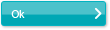
<style>
.page{position:relative;width:110px;height:30px;background:#4dc2cb}
.page>*{position:absolute;margin:0}
.t1{font:11px "MyriadPro-Regular";color:#ffffff}
</style>
<div class="page">
<p class="t1" style="left:11px;top:10px;width:14px;height:8px">Ok</p>
</div>
